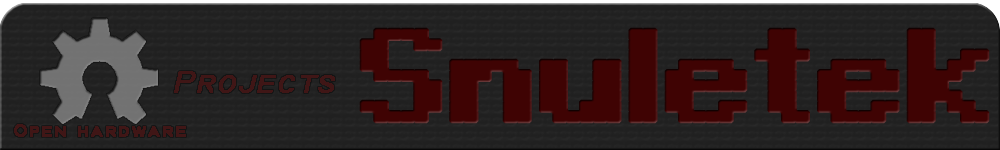
<style>
.page{position:relative;width:1000px;height:150px}
.page>*{position:absolute;margin:0}
.t1{font:130px "DisplayOTF";letter-spacing:-0.05em;color:#3f0303;font-weight:bold;scale:1.3 1}
.t2{font:30px "TechnicBold";color:#401616;font-weight:bold;font-style:italic;scale:1.3 1}
.t3{font:18px "TechnicBold";color:#401616;font-weight:bold;scale:1.3 1}
</style>
<div class="page">
<p class="t1" style="left:359px;top:27px;width:631px;height:97px">Snuletek</p>
<p class="t2" style="left:174px;top:71px;width:161px;height:22px">Projects</p>
<p class="t3" style="left:14px;top:124px;width:172px;height:13px">Open hardware</p>
</div>
